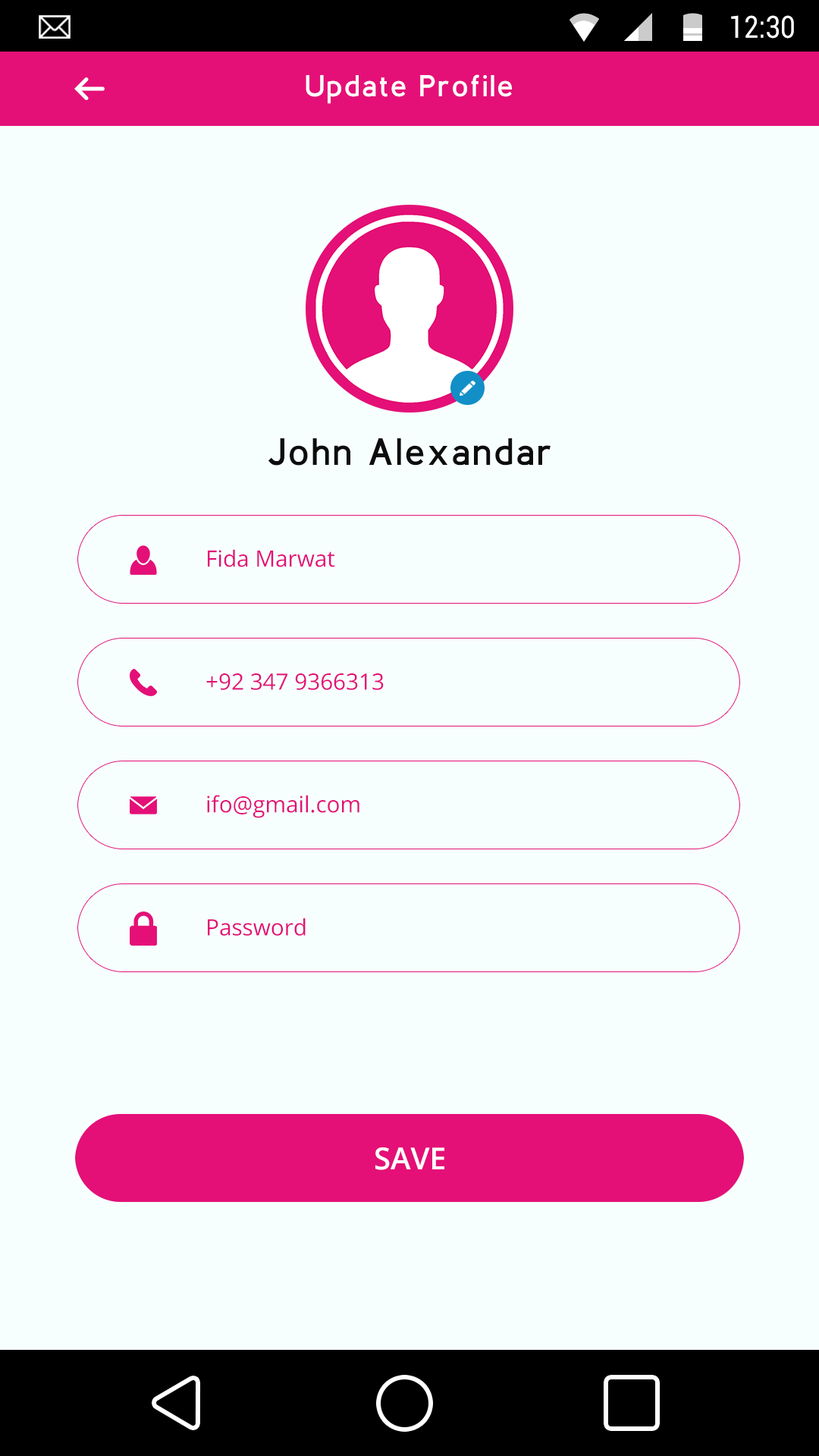
<style>
.page{position:relative;width:819px;height:1456px;background:#f7fffe}
.page>*{position:absolute;margin:0}
.t1{font:30.5px "Roboto-Regular";color:#ffffff;scale:0.87 1}
.t2{font:30.3px "BerlinBold";letter-spacing:0.1em;color:#ffffff}
.t3{font:37.9px "BerlinBold";letter-spacing:0.1em;color:#0c0c0c}
.t4{font:22.5px "OpenSans";color:#e41077}
.t5{font:30.3px "OpenSans-Semibold";color:#ffffff}
</style>
<div class="page">
<p class="t1" style="left:731px;top:15px;width:63px;height:24px">12:30</p>
<p class="t2" style="left:306px;top:74px;width:206px;height:30px">Update Profile</p>
<p class="t3" style="left:268px;top:438px;width:283px;height:28px">John Alexandar</p>
<p class="t4" style="left:208px;top:549px;width:127px;height:18px">Fida Marwat</p>
<p class="t4" style="left:206px;top:673px;width:178px;height:17px">+92 347 9366313</p>
<p class="t4" style="left:207px;top:795px;width:152px;height:23px">ifo@gmail.com</p>
<p class="t4" style="left:208px;top:918px;width:98px;height:18px">Password</p>
<p class="t5" style="left:375px;top:1147px;width:69px;height:23px">SAVE</p>
</div>
